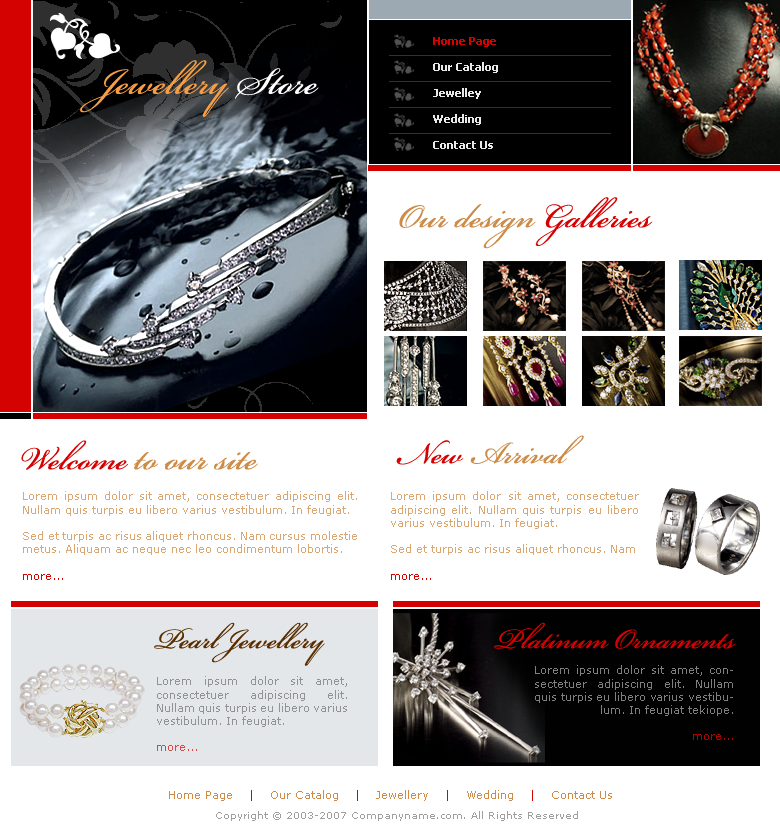
<style>
.page{position:relative;width:780px;height:840px;background:#ffffff}
.page>*{position:absolute;margin:0}
.t1{font:11px/26px "Tahoma-Bold";color:#e9e9e9}
.t2{font:11px/26px "Tahoma-Bold";color:#d50202}
.t3{font:58px "BeautifulES";color:#f69e45}
.t4{font:58px "BeautifulES";color:#ffffff}
.t5{font:52px "BeautifulES";color:#cd8b48}
.t6{font:52px "BeautifulES";color:#d50101}
.t7{font:48px "BeautifulES";color:#cd8b48}
.t8{font:48px "BeautifulES";color:#d50101}
.t9{font:54px "BeautifulES";color:#cd8b48}
.t10{font:50px "BeautifulES";color:#d50101}
.t11{font:11px "Verdana";color:#daa773}
.t12{font:11px "Verdana";color:#d50202}
.t13{font:44px "BeautifulES";color:#5a2d00}
.t14{font:44px "BeautifulES";color:#d50101}
.t15{font:11px "Verdana";color:#808080}
.t16{font:11px "Verdana";color:#919294}
.t17{font:11px "Verdana";color:#cd8b48}
.t18{font:10px "Verdana";color:#9e9e9e}
</style>
<div class="page">
<p class="t1" style="left:433px;top:37px;width:65px;height:112px"><span class="t2">Home Page<br></span>Our Catalog<br>Jewelley<br>Wedding<br>Contact Us</p>
<p class="t3" style="left:80px;top:60px;width:239px;height:57px">Jewellery <span class="t4">Store</span></p>
<p class="t5" style="left:399px;top:197px;width:254px;height:52px">Our design <span class="t6">Galleries</span></p>
<p class="t7" style="left:396px;top:435px;width:188px;height:30px"><span class="t8">New </span>Arrival</p>
<p class="t9" style="left:21px;top:440px;width:237px;height:30px"><span class="t10">Welcome </span>to our site</p>
<p class="t11" style="left:23px;top:491px;width:334px;height:89px;text-align:justify">Lorem ipsum dolor sit amet, consectetuer adipiscing elit. Nullam quis turpis eu libero varius vestibulum. In feugiat. <br><br>Sed et turpis ac risus aliquet rhoncus. Nam cursus molestie metus. Aliquam ac neque nec leo condimentum lobortis. <br><br><span class="t12">more...</span></p>
<p class="t11" style="left:391px;top:491px;width:248px;height:89px;text-align:justify">Lorem ipsum dolor sit amet, consectetuer adipiscing elit. Nullam quis turpis eu libero varius vestibulum. In feugiat. <br><br>Sed et turpis ac risus aliquet rhoncus. Nam <br><br><span class="t12">more...</span></p>
<p class="t13" style="left:154px;top:622px;width:171px;height:44px">Pearl Jewellery</p>
<p class="t14" style="left:494px;top:622px;width:242px;height:27px">Platinum Ornaments</p>
<p class="t15" style="left:535px;top:665px;width:198px;height:75px;text-align:justify">Lorem ipsum dolor sit amet, consectetuer adipiscing elit. Nullam quis turpis eu libero varius vestibulum. In feugiat tekiope.<br> <br>more...</p>
<p class="t16" style="left:157px;top:676px;width:190px;height:75px;text-align:justify">Lorem ipsum dolor sit amet, consectetuer adipiscing elit. Nullam quis turpis eu libero varius vestibulum. In feugiat. <br> <br>more...</p>
<p class="t17" style="left:169px;top:790px;width:443px;height:11px">Home Page    <span class="t12">|</span>    Our Catalog    <span class="t12">|</span>    Jewellery    <span class="t12">|</span>    Wedding    <span class="t12">|</span>    Contact Us</p>
<p class="t18" style="left:216px;top:811px;width:362px;height:10px">Copyright © 2003-2007 Companyname.com. All Rights Reserved</p>
</div>
